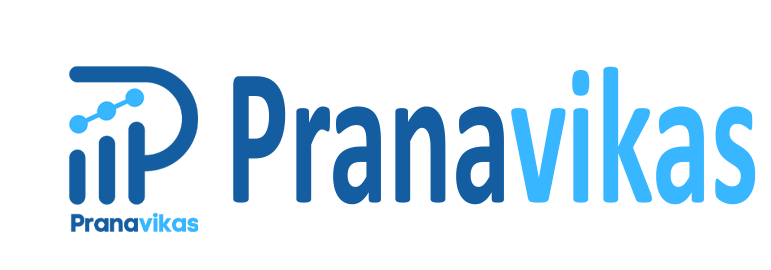
<style>
.page{position:relative;width:771px;height:270px;background:#ffffff}
.page>*{position:absolute;margin:0}
.t1{font:199.4px "Calibri-Bold";color:#145da0;scale:0.6 1}
.t2{font:199.4px "Calibri-Bold";color:#38b6ff;scale:0.6 1}
</style>
<div class="page">
<p class="t1" style="left:233px;top:66px;width:523px;height:139px">Prana<span class="t2">vikas</span></p>
</div>
